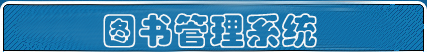
<style>
.page{position:relative;width:427px;height:52px}
.page>*{position:absolute;margin:0}
.t1{font:36px "STCaiyun";color:#f5f5f5}
</style>
<div class="page">
<p class="t1" style="left:103px;top:13px;width:214px;height:35px">图书管理系统</p>
</div>
